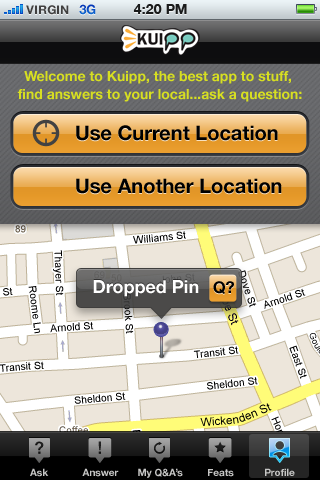
<style>
.page{position:relative;width:320px;height:480px}
.page>*{position:absolute;margin:0}
.t1{font:12px "HelveticaNeue-Bold";color:#404040;text-transform:uppercase}
.t2{font:13px "HelveticaNeue-Bold";color:#0c54c5;text-transform:uppercase}
.t3{font:14px "HelveticaNeue-Bold";color:#1a1b1b;text-transform:uppercase}
.t4{font:14px/18px "HelveticaNeue-Bold";color:#d7df21}
.t5{font:20px "HelveticaNeue-Bold";color:#000000}
.t6{font:18px "HelveticaNeue-Bold";color:#ffffff}
.t7{font:16px "HelveticaNeue-Bold";color:#000000}
.t8{font:10px "HelveticaNeue-Bold";color:#c6c6c5}
</style>
<div class="page">
<p class="t1" style="left:26px;top:5px;width:43px;height:10px">VIRGIN</p>
<p class="t2" style="left:79px;top:4px;width:17px;height:11px">3G</p>
<p class="t3" style="left:133px;top:4px;width:54px;height:10px">4:20 PM</p>
<p class="t4" style="left:17px;top:71px;width:285px;height:31px;text-align:center">Welcome to Kuipp, the best app to stuff, <br>find answers to your local...ask a question:</p>
<p class="t5" style="left:76px;top:125px;width:202px;height:16px">Use Current Location</p>
<p class="t5" style="left:76px;top:178px;width:206px;height:16px">Use Another Location</p>
<p class="t6" style="left:93px;top:280px;width:106px;height:17px">Dropped Pin</p>
<p class="t7" style="left:213px;top:281px;width:21px;height:13px">Q?</p>
<p class="t8" style="left:30px;top:468px;width:19px;height:9px">Ask</p>
<p class="t8" style="left:82px;top:468px;width:37px;height:9px">Answer</p>
<p class="t8" style="left:138px;top:468px;width:45px;height:10px">My Q&amp;A’s</p>
<p class="t8" style="left:208px;top:469px;width:26px;height:8px">Feats</p>
<p class="t8" style="left:265px;top:468px;width:30px;height:8px">Profile</p>
</div>
